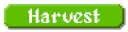
<style>
.page{position:relative;width:128px;height:32px;background:#60bf00}
.page>*{position:absolute;margin:0}
.t1{font:20.8px "Alagard";color:#ffffff}
</style>
<div class="page">
<p class="t1" style="left:28px;top:8px;width:72px;height:15px">Harvest</p>
</div>
